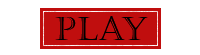
<style>
.page{position:relative;width:200px;height:55px;background:#ffffff}
.page>*{position:absolute;margin:0}
.t1{font:33.3px "Castellar";color:#000000}
</style>
<div class="page">
<p class="t1" style="left:55px;top:16px;width:93px;height:24px">play</p>
</div>
